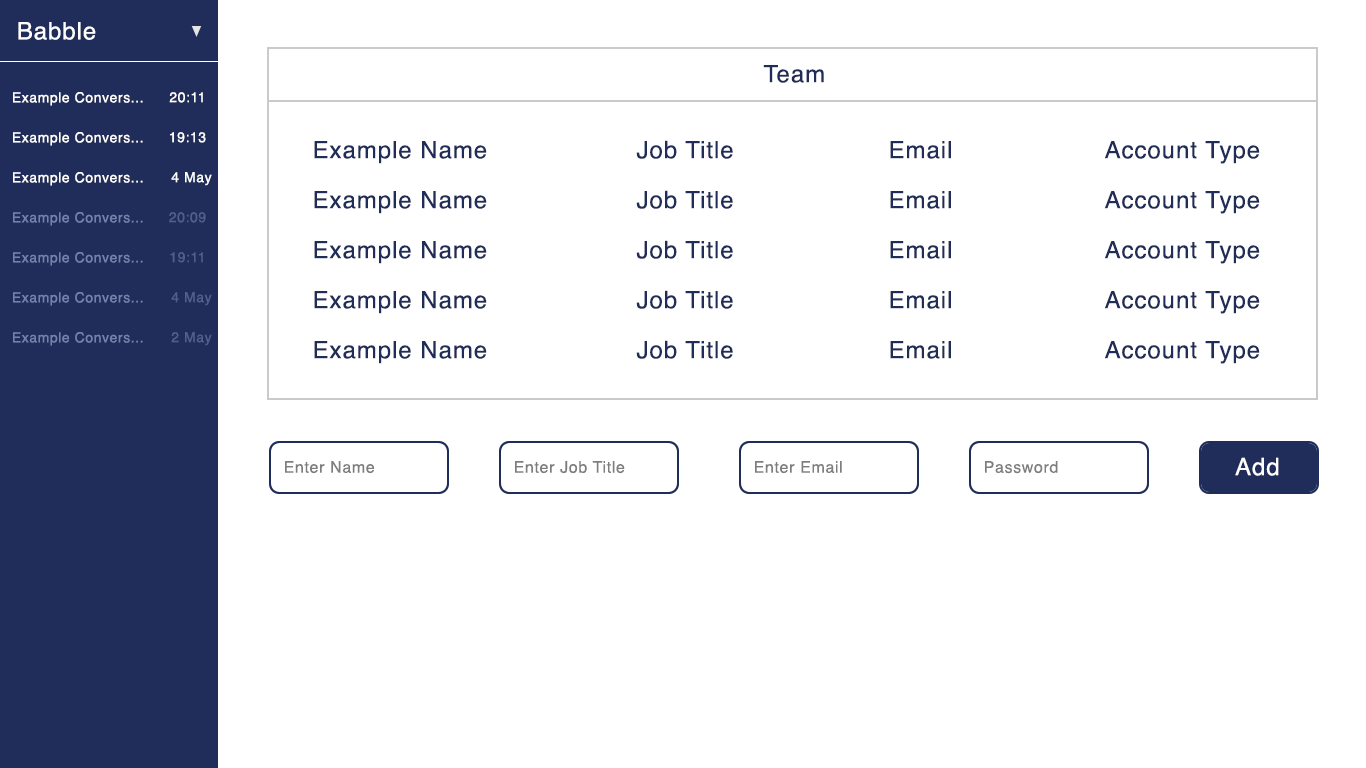
<style>
.page{position:relative;width:1366px;height:768px;background:#ffffff}
.page>*{position:absolute;margin:0}
.t1{font:24px "Helvetica";letter-spacing:0.04em;color:#ffffff}
.t2{font:24px "Helvetica";letter-spacing:0.04em;color:#202d59}
.t3{font:14px "Helvetica";letter-spacing:0.04em;color:#ffffff}
.t4{font:14px "Helvetica";letter-spacing:0.04em;color:#7582ae}
.t5{font:14px "Helvetica";letter-spacing:0.04em;color:#525f8b}
.t6{font:16px "Helvetica";letter-spacing:0.04em;color:#7e7e7e}
</style>
<div class="page">
<p class="t1" style="left:18px;top:22px;width:78px;height:18px">Babble</p>
<p class="t2" style="left:763px;top:65px;width:61px;height:18px">Team</p>
<p class="t3" style="left:13px;top:92px;width:130px;height:14px">Example Convers...</p>
<p class="t3" style="left:169px;top:92px;width:34px;height:11px">20:11</p>
<p class="t3" style="left:13px;top:132px;width:130px;height:14px">Example Convers...</p>
<p class="t3" style="left:170px;top:132px;width:36px;height:11px">19:13</p>
<p class="t2" style="left:314px;top:140px;width:946px;height:24px">Example Name     Job Title     Email     Account Type</p>
<p class="t3" style="left:13px;top:172px;width:130px;height:14px">Example Convers...</p>
<p class="t3" style="left:171px;top:172px;width:41px;height:14px">4 May</p>
<p class="t2" style="left:314px;top:190px;width:946px;height:24px">Example Name     Job Title     Email     Account Type</p>
<p class="t4" style="left:13px;top:212px;width:130px;height:14px">Example Convers...</p>
<p class="t5" style="left:169px;top:212px;width:37px;height:11px">20:09</p>
<p class="t2" style="left:314px;top:240px;width:946px;height:24px">Example Name     Job Title     Email     Account Type</p>
<p class="t4" style="left:13px;top:252px;width:130px;height:14px">Example Convers...</p>
<p class="t5" style="left:170px;top:252px;width:33px;height:11px">19:11</p>
<p class="t4" style="left:13px;top:292px;width:130px;height:14px">Example Convers...</p>
<p class="t5" style="left:171px;top:292px;width:41px;height:14px">4 May</p>
<p class="t2" style="left:314px;top:290px;width:946px;height:24px">Example Name     Job Title     Email     Account Type</p>
<p class="t4" style="left:13px;top:332px;width:130px;height:14px">Example Convers...</p>
<p class="t5" style="left:171px;top:332px;width:41px;height:14px">2 May</p>
<p class="t2" style="left:314px;top:340px;width:946px;height:24px">Example Name     Job Title     Email     Account Type</p>
<p class="t6" style="left:285px;top:461px;width:90px;height:13px">Enter Name</p>
<p class="t6" style="left:515px;top:461px;width:110px;height:13px">Enter Job Title</p>
<p class="t6" style="left:755px;top:461px;width:87px;height:13px">Enter Email</p>
<p class="t6" style="left:985px;top:461px;width:73px;height:13px">Password</p>
<p class="t1" style="left:1235px;top:457px;width:44px;height:19px">Add</p>
</div>
